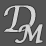
<style>
.page{position:relative;width:46px;height:46px;background:#535353}
.page>*{position:absolute;margin:0}
.t1{font:36px "LucidaCalligraphy-Italic";letter-spacing:-0.02em;color:#d4d4d4;font-weight:bold}
.t2{font:24px "LucidaCalligraphy-Italic";letter-spacing:-0.02em;color:#d4d4d4;font-weight:bold}
</style>
<div class="page">
<p class="t1" style="left:3px;top:5px;width:33px;height:28px">D</p>
<p class="t2" style="left:15px;top:24px;width:28px;height:20px">M</p>
</div>
